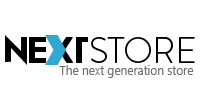
<style>
.page{position:relative;width:200px;height:100px;background:#ffffff}
.page>*{position:absolute;margin:0}
.t1{font:13px "SegoeUI";letter-spacing:-0.02em;color:#6f6f6f;scale:0.95 1}
</style>
<div class="page">
<p class="t1" style="left:59px;top:65px;width:135px;height:13px">The next generation store</p>
</div>
